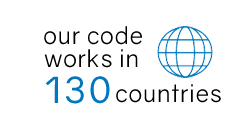
<style>
.page{position:relative;width:250px;height:130px;background:#ffffff}
.page>*{position:absolute;margin:0}
.t1{font:24px "Gravity-Book";letter-spacing:0.025em;color:#000000}
.t2{font:36px "Gravity-Regular";letter-spacing:0.1em;color:#0077be}
</style>
<div class="page">
<p class="t1" style="left:44px;top:26px;width:98px;height:19px">our code</p>
<p class="t1" style="left:44px;top:49px;width:94px;height:19px">works in</p>
<p class="t2" style="left:46px;top:76px;width:64px;height:28px">130</p>
<p class="t1" style="left:116px;top:84px;width:105px;height:19px">countries</p>
</div>
